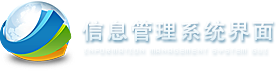
<style>
.page{position:relative;width:276px;height:71px;background:#ffffff}
.page>*{position:absolute;margin:0}
.t1{font:22px "FZHTJW--GB1-0";letter-spacing:0.103em;color:#f3fafd}
.t2{font:8px "SG08";letter-spacing:0.1em;color:#f9fbfc}
</style>
<div class="page">
<p class="t1" style="left:82px;top:20px;width:191px;height:21px">信息管理系统界面</p>
<p class="t2" style="left:84px;top:48px;width:183px;height:5px">INFORMATION MANAGEMENT SYSTEM GUI</p>
</div>
